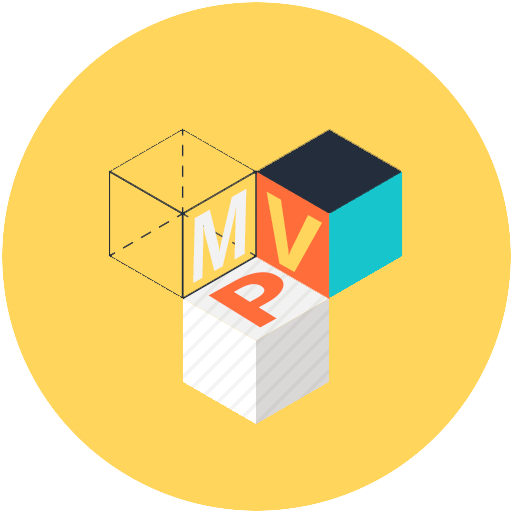
<style>
.page{position:relative;width:512px;height:512px;background:#ffd55c}
.page>*{position:absolute;margin:0}
.t1{font:92.9px "SegoeUI-Bold";color:#f2f2f2;text-transform:uppercase;scale:0.8 1}
.t2{font:87.2px "SegoeUI-Bold";color:#ffd55c;text-transform:uppercase;scale:1.11 1}
.t3{font:86.8px "SegoeUI-Bold";color:#ff6d3b;text-transform:uppercase;scale:1.36 1}
</style>
<div class="page">
<p class="t1" style="left:193px;top:189px;width:54px;height:94px;rotate:-30deg">M</p>
<p class="t2" style="left:266px;top:191px;width:56px;height:81px;rotate:29deg">V</p>
<p class="t3" style="left:208px;top:272px;width:76px;height:56px;rotate:-29deg">P</p>
</div>
